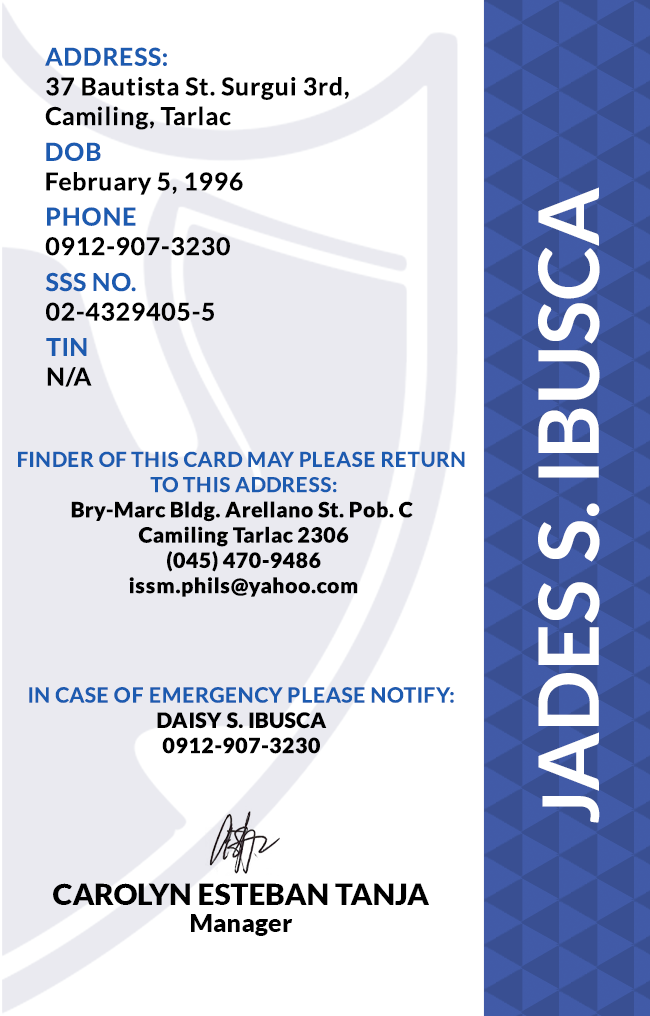
<style>
.page{position:relative;width:650px;height:1016px;background:#ffffff}
.page>*{position:absolute;margin:0}
.t1{font:24.7px/29.6px "Lato-Bold";letter-spacing:0.025em;color:#000000}
.t2{font:24.7px/29.6px "Lato-Bold";letter-spacing:0.025em;color:#1c5bb0}
.t3{font:83.3px "Lato-Bold";color:#ffffff}
.t4{font:77.6px "Lato-Bold";color:#ffffff}
.t5{font:21.1px "Lato-Black";letter-spacing:0.025em}
.t6{font:20.5px/25.3px "Lato-Bold";letter-spacing:0.025em;text-transform:uppercase}
.t7{font:21.1px/25.3px "Lato-Bold";letter-spacing:0.025em;color:#1c5bb0}
.t8{font:21.1px "Lato-Black";letter-spacing:0.025em;color:#000000}
.t9{font:29.5px "Lato-Black";color:#000000}
.t10{font:25px "Lato-Black";color:#000000}
</style>
<div class="page">
<p class="t1" style="left:45px;top:47px;width:304px;height:83px"><span class="t2">ADDRESS:<br></span>37 Bautista St. Surgui 3rd,<br>Camiling, Tarlac</p>
<p class="t1" style="left:46px;top:142px;width:197px;height:53px"><span class="t2">DOB<br></span>February 5, 1996</p>
<p class="t3" style="left:538px;top:187px;width:62px;height:636px;rotate:-90deg"><span class="t4">J</span>ADES S. IBUSCA</p>
<p class="t1" style="left:45px;top:207px;width:185px;height:49px"><span class="t2">PHONE <br></span>0912-907-3230</p>
<p class="t1" style="left:45px;top:272px;width:169px;height:49px"><span class="t2">SSS NO.<br></span>02-4329405-5</p>
<p class="t2" style="left:46px;top:338px;width:46px;height:49px">TIN<br><span class="t1">N/A</span></p>
<p class="t5" style="left:18px;top:451px;width:447px;height:146px;text-align:center"><span class="t6">Finder of this card may please return <br>to this address:<br></span>Bry-Marc Bldg. Arellano St. Pob. C <br>Camiling Tarlac 2306<br>(045) 470-9486<br>issm.phils@yahoo.com</p>
<p class="t7" style="left:29px;top:687px;width:425px;height:67px;text-align:center">IN CASE OF EMERGENCY PLEASE NOTIFY:<br><span class="t8">DAISY S. IBUSCA<br>0912-907-3230</span></p>
<p class="t9" style="left:53px;top:883px;width:376px;height:22px">CAROLYN ESTEBAN TANJA</p>
<p class="t10" style="left:191px;top:914px;width:102px;height:22px">Manager</p>
</div>
